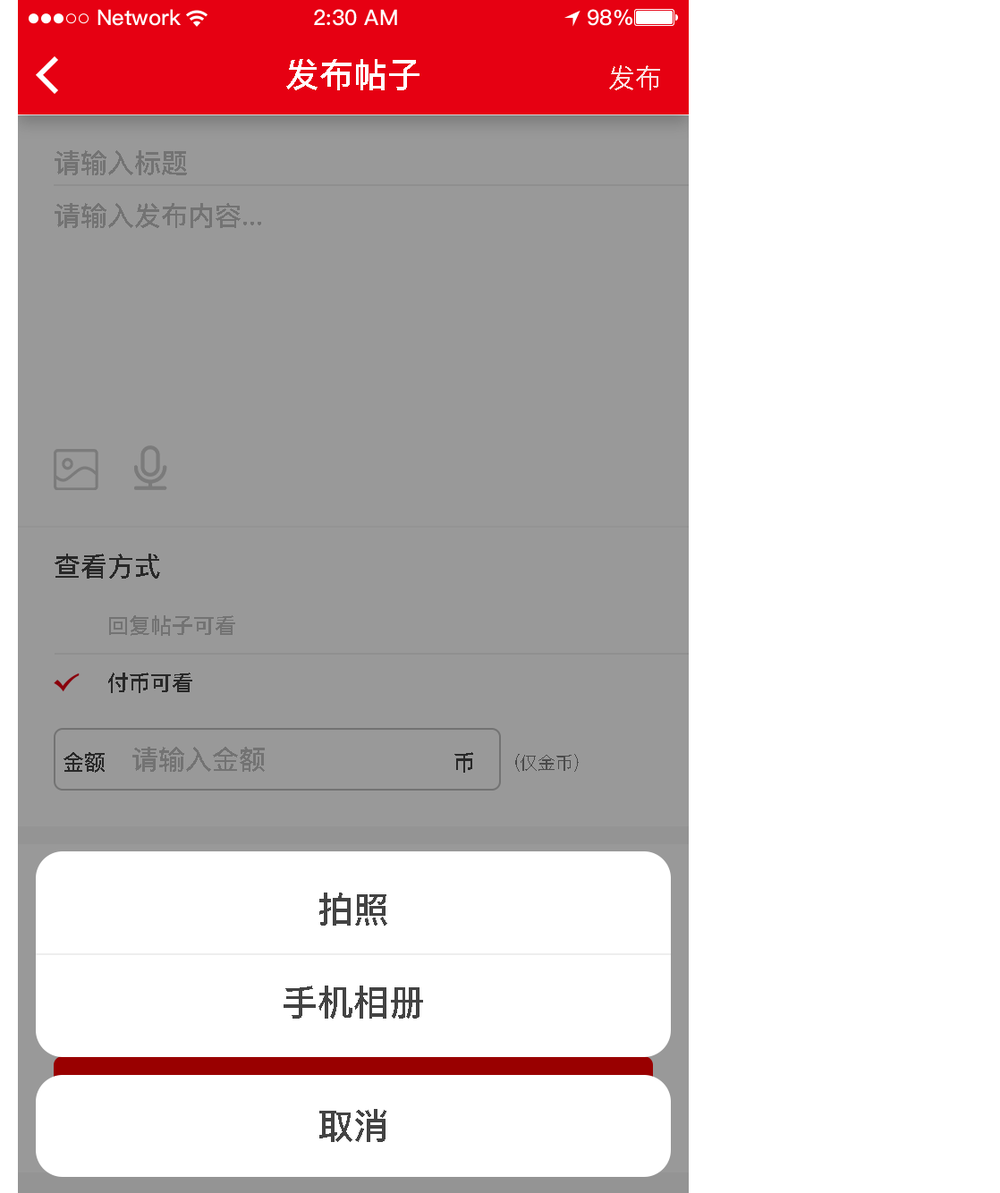
<style>
.page{position:relative;width:1000px;height:1193px;background:#ffffff}
.page>*{position:absolute;margin:0}
.t1{font:34px "PingFangSC-Medium";color:#ffffff;text-transform:uppercase}
.t2{font:26.8px "PingFangSC-Regular";color:#faddde;text-transform:uppercase}
.t3{font:26.8px "PingFangSC-Medium";color:#737373;text-transform:uppercase}
.t4{font:26.8px "PingFangSC-Medium";color:#282828;text-transform:uppercase}
.t5{font:21.5px "PingFangSC-Medium";color:#737373;text-transform:uppercase}
.t6{font:21.5px "PingFangSC-Medium";color:#282828;text-transform:uppercase}
.t7{font:17.9px "PingFangSC-Regular";color:#4b4b4b;text-transform:uppercase}
.t8{font:35.8px "PingFangSC-Medium";color:#434343;text-transform:uppercase}
</style>
<div class="page">
<p class="t1" style="left:286px;top:59px;width:133px;height:31px">发布帖子</p>
<p class="t2" style="left:609px;top:65px;width:51px;height:25px">发布</p>
<p class="t3" style="left:55px;top:150px;width:132px;height:25px">请输入标题</p>
<p class="t3" style="left:55px;top:203px;width:206px;height:25px">请输入发布内容...</p>
<p class="t4" style="left:55px;top:553px;width:105px;height:26px">查看方式</p>
<p class="t5" style="left:109px;top:615px;width:126px;height:21px">回复帖子可看</p>
<p class="t6" style="left:108px;top:672px;width:84px;height:21px">付币可看</p>
<p class="t3" style="left:132px;top:747px;width:133px;height:25px">请输入金额</p>
<p class="t6" style="left:63px;top:752px;width:42px;height:21px">金额</p>
<p class="t6" style="left:454px;top:752px;width:19px;height:21px">币</p>
<p class="t7" style="left:515px;top:754px;width:64px;height:18px">(仅金币)</p>
<p class="t8" style="left:319px;top:892px;width:68px;height:33px">拍照</p>
<p class="t8" style="left:283px;top:985px;width:140px;height:33px">手机相册</p>
<p class="t8" style="left:319px;top:1109px;width:67px;height:33px">取消</p>
</div>
